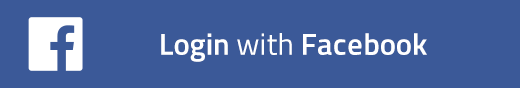
<style>
.page{position:relative;width:520px;height:88px;background:#3b5998}
.page>*{position:absolute;margin:0}
.t1{font:30.3px "Titillium-Semibold";color:#ffffff}
.t2{font:30.3px "Titillium-Regular";color:#ffffff}
</style>
<div class="page">
<p class="t1" style="left:161px;top:33px;width:266px;height:29px">Login <span class="t2">with </span>Facebook</p>
</div>
